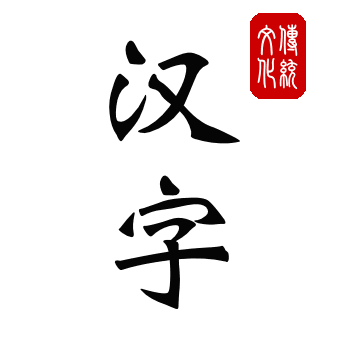
<style>
.page{position:relative;width:350px;height:349px;background:#ffffff}
.page>*{position:absolute;margin:0}
.t1{font:33.3px "HYj3gf";color:#ffffff}
.t2{font:150px "WeibeiSC-Bold";letter-spacing:-0.1em;color:#050505}
</style>
<div class="page">
<p class="t1" style="left:257px;top:24px;width:19px;height:65px">文化</p>
<p class="t1" style="left:279px;top:24px;width:19px;height:66px">传统</p>
<p class="t2" style="left:109px;top:40px;width:131px;height:269px">汉字</p>
</div>
